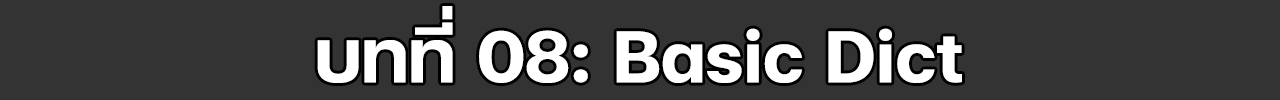
<style>
.page{position:relative;width:1280px;height:100px;background:#333333}
.page>*{position:absolute;margin:0}
.t1{font:100px "FCMinimalBold";color:#ffffff}
</style>
<div class="page">
<p class="t1" style="left:317px;top:6px;width:645px;height:77px">บทที่ 08: Basic Dict</p>
</div>
